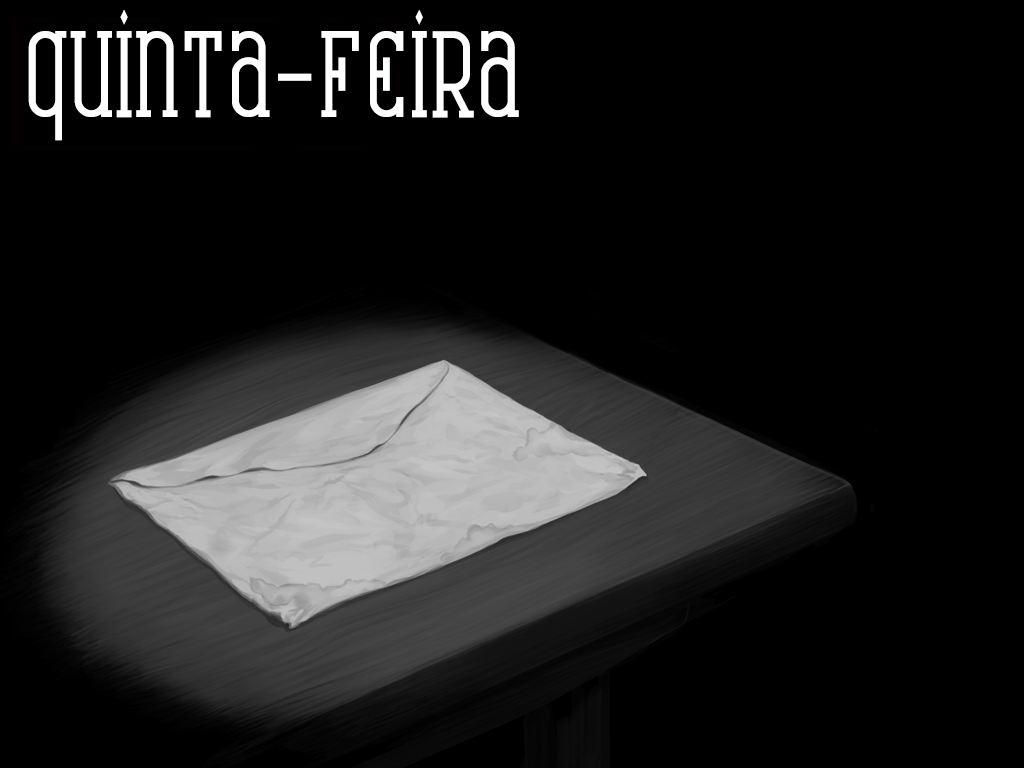
<style>
.page{position:relative;width:1024px;height:768px;background:#000000}
.page>*{position:absolute;margin:0}
.t1{font:132px "CatharsisRequiemBold";letter-spacing:-0.002em;color:#ffffff}
</style>
<div class="page">
<p class="t1" style="left:28px;top:10px;width:491px;height:131px">quinta-feira</p>
</div>
